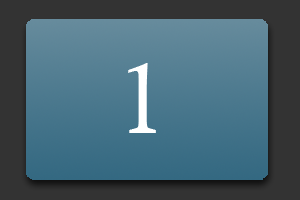
<style>
.page{position:relative;width:300px;height:200px;background:#333333}
.page>*{position:absolute;margin:0}
.t1{font:98.1px "CalistoMT";color:#ffffff}
</style>
<div class="page">
<p class="t1" style="left:128px;top:63px;width:28px;height:70px">1</p>
</div>
